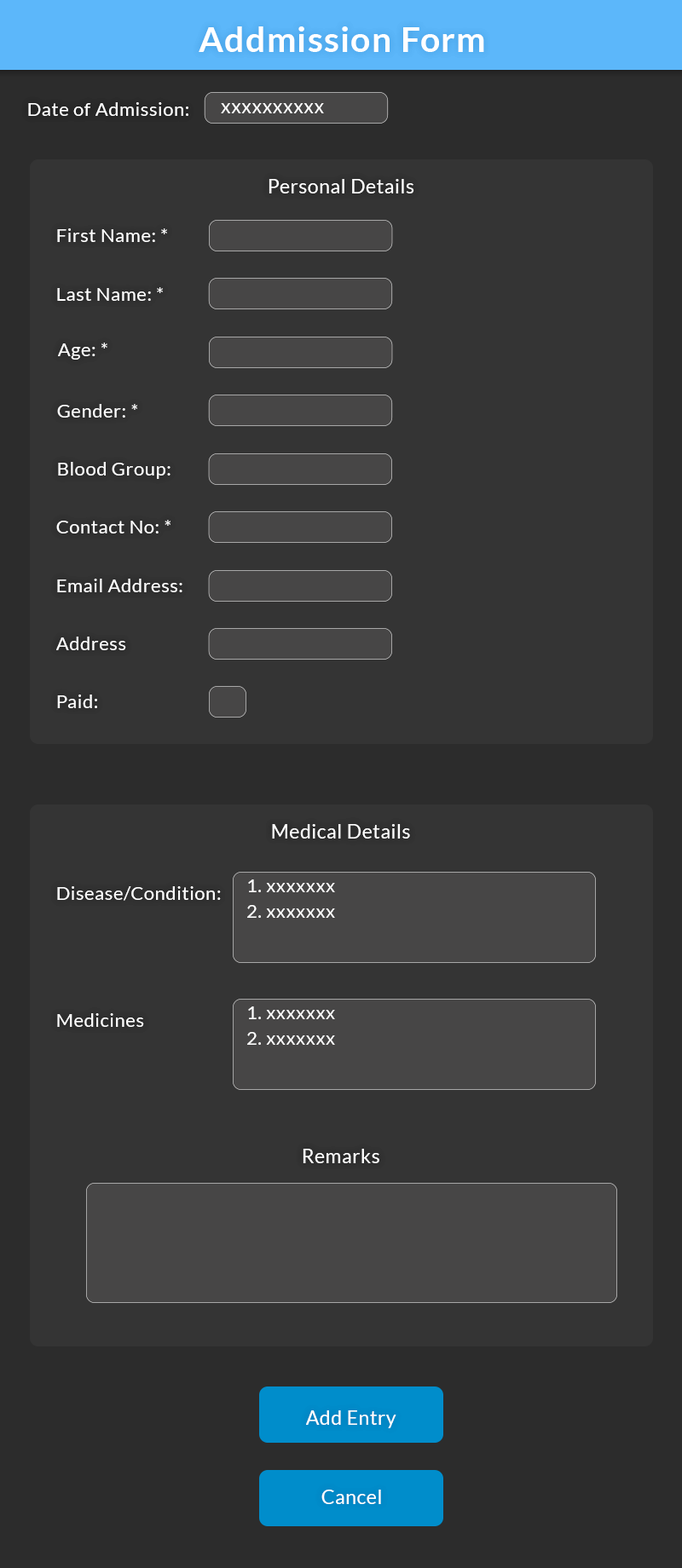
<style>
.page{position:relative;width:682px;height:1568px;background:#343434}
.page>*{position:absolute;margin:0}
.t1{font:35.3px "Lato-Bold";letter-spacing:0.025em;color:#ffffff}
.t2{font:18.7px "Lato-Regular";letter-spacing:0.025em;color:#ffffff}
.t3{font:19.6px "Lato-Regular";letter-spacing:0.025em;color:#ffffff}
</style>
<div class="page">
<p class="t1" style="left:199px;top:26px;width:285px;height:26px">Addmission Form</p>
<p class="t2" style="left:28px;top:102px;width:160px;height:14px">Date of Admission:</p>
<p class="t3" style="left:221px;top:103px;width:103px;height:10px">xxxxxxxxxx</p>
<p class="t3" style="left:268px;top:179px;width:146px;height:14px">Personal Details</p>
<p class="t2" style="left:57px;top:228px;width:110px;height:14px">First Name: *</p>
<p class="t2" style="left:57px;top:287px;width:106px;height:14px">Last Name: *</p>
<p class="t2" style="left:58px;top:343px;width:49px;height:17px">Age: *</p>
<p class="t2" style="left:57px;top:404px;width:80px;height:14px">Gender: *</p>
<p class="t2" style="left:58px;top:462px;width:112px;height:17px">Blood Group:</p>
<p class="t2" style="left:56px;top:520px;width:114px;height:13px">Contact No: *</p>
<p class="t2" style="left:57px;top:579px;width:125px;height:13px">Email Address:</p>
<p class="t2" style="left:56px;top:637px;width:70px;height:13px">Address</p>
<p class="t2" style="left:57px;top:695px;width:40px;height:13px">Paid:</p>
<p class="t3" style="left:272px;top:824px;width:138px;height:15px">Medical Details</p>
<p class="t2" style="left:248px;top:879px;width:87px;height:13px">1. xxxxxxx</p>
<p class="t2" style="left:57px;top:886px;width:164px;height:15px">Disease/Condition:</p>
<p class="t2" style="left:247px;top:905px;width:88px;height:13px">2. xxxxxxx</p>
<p class="t2" style="left:57px;top:1013px;width:87px;height:14px">Medicines</p>
<p class="t2" style="left:248px;top:1006px;width:87px;height:13px">1. xxxxxxx</p>
<p class="t2" style="left:247px;top:1032px;width:88px;height:13px">2. xxxxxxx</p>
<p class="t3" style="left:303px;top:1149px;width:76px;height:14px">Remarks</p>
<p class="t3" style="left:306px;top:1410px;width:90px;height:18px">Add Entry</p>
<p class="t3" style="left:321px;top:1490px;width:60px;height:14px">Cancel</p>
</div>
